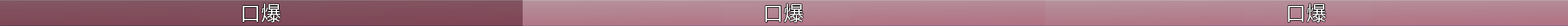
<style>
.page{position:relative;width:1568px;height:26px}
.page>*{position:absolute;margin:0}
.t1{font:20.6px "SourceHanSansSC-Normal";color:#ffffff}
</style>
<div class="page">
<p class="t1" style="left:242px;top:3px;width:39px;height:20px">口爆</p>
<p class="t1" style="left:765px;top:3px;width:39px;height:20px">口爆</p>
<p class="t1" style="left:1288px;top:3px;width:38px;height:20px">口爆</p>
</div>
